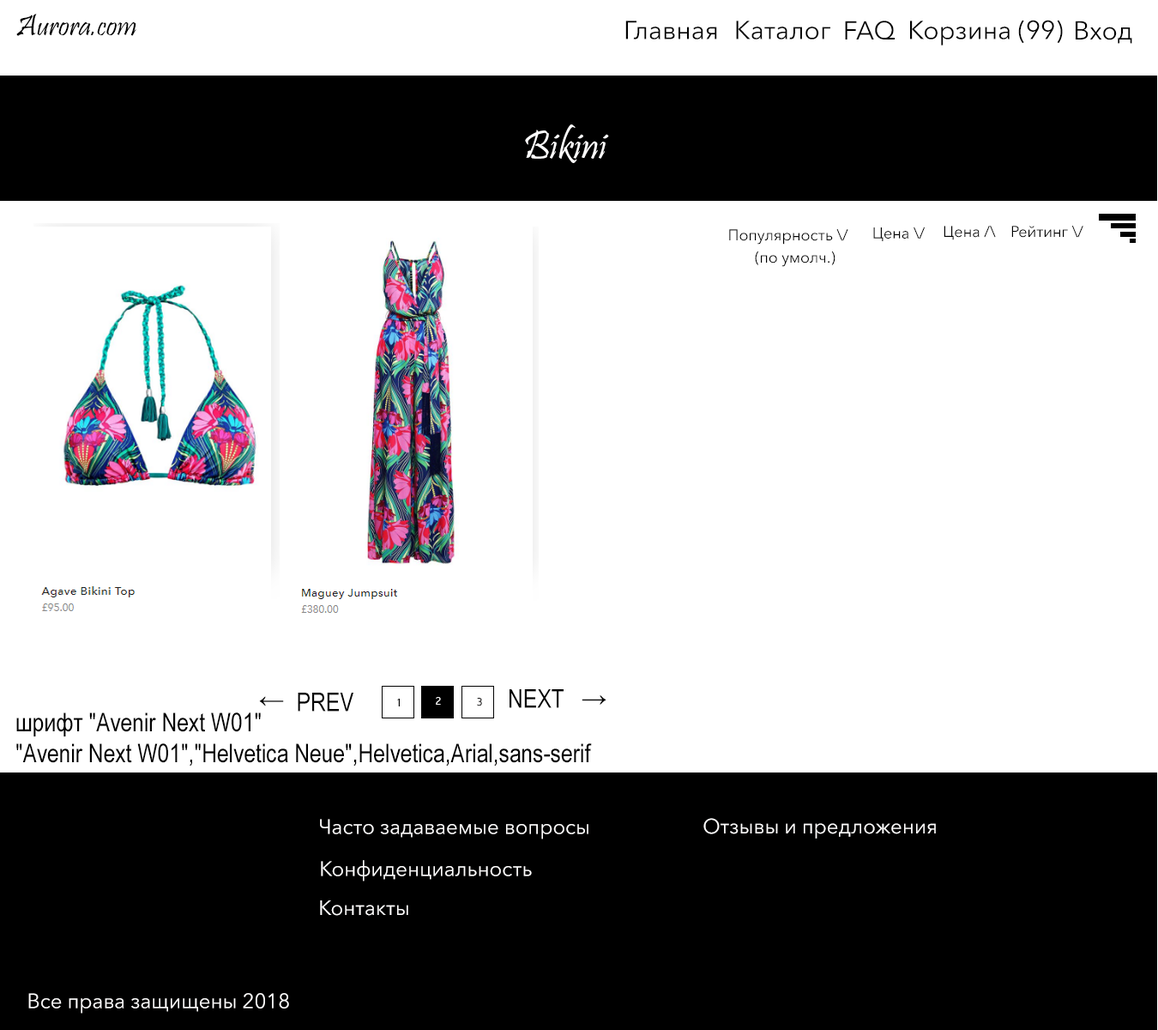
<style>
.page{position:relative;width:1158px;height:1030px;background:#ffffff}
.page>*{position:absolute;margin:0}
.t1{font:30.9px "Pristina-Regular";color:#000000}
.t2{font:25.7px "AvenirNextCyr-Regular";color:#000000}
.t3{font:41.2px "Pristina-Regular";color:#fffefe}
.t4{font:15.4px "AvenirNextCyr-Regular";color:#000000}
.t5{font:25.7px "ArialNarrow";color:#000000}
.t6{font:12px "Raavi";color:#000000}
.t7{font:12px "Raavi";color:#ffffff}
.t8{font:12px "Raavi";color:#010000}
.t9{font:20.6px "AvenirNextCyr-Regular";color:#fffefe}
</style>
<div class="page">
<p class="t1" style="left:16px;top:14px;width:120px;height:22px">Aurora.com</p>
<p class="t2" style="left:625px;top:21px;width:92px;height:18px">Главная</p>
<p class="t2" style="left:736px;top:21px;width:94px;height:18px">Каталог</p>
<p class="t2" style="left:845px;top:21px;width:50px;height:18px">FAQ</p>
<p class="t2" style="left:910px;top:20px;width:153px;height:25px">Корзина (99)</p>
<p class="t2" style="left:1076px;top:21px;width:56px;height:23px">Вход</p>
<p class="t3" style="left:525px;top:124px;width:84px;height:39px">Bikini</p>
<p class="t4" style="left:729px;top:229px;width:120px;height:16px">Популярность \/</p>
<p class="t4" style="left:873px;top:226px;width:52px;height:15px">Цена \/</p>
<p class="t4" style="left:944px;top:226px;width:52px;height:14px">Цена /\</p>
<p class="t4" style="left:1012px;top:226px;width:72px;height:12px">Рейтинг \/</p>
<p class="t4" style="left:755px;top:251px;width:81px;height:16px">(по умолч.)</p>
<p class="t5" style="left:510px;top:689px;width:54px;height:19px">NEXT</p>
<p class="t5" style="left:259px;top:696px;width:25px;height:10px">←</p>
<p class="t5" style="left:298px;top:692px;width:55px;height:19px">PREV</p>
<p class="t6" style="left:397px;top:698px;width:3px;height:8px">1</p>
<p class="t7" style="left:436px;top:697px;width:5px;height:7px">2</p>
<p class="t8" style="left:477px;top:698px;width:5px;height:8px">3</p>
<p class="t5" style="left:582px;top:695px;width:25px;height:9px">→</p>
<p class="t5" style="left:16px;top:712px;width:576px;height:54px;text-align:right">шрифт "Avenir Next W01"<br>"Avenir Next W01","Helvetica Neue",Helvetica,Arial,sans-serif</p>
<p class="t9" style="left:320px;top:818px;width:269px;height:21px">Часто задаваемые вопросы</p>
<p class="t9" style="left:704px;top:818px;width:232px;height:20px">Отзывы и предложения</p>
<p class="t9" style="left:321px;top:860px;width:211px;height:21px">Конфиденциальность</p>
<p class="t9" style="left:320px;top:900px;width:88px;height:15px">Контакты</p>
<p class="t9" style="left:28px;top:993px;width:261px;height:20px">Все права защищены 2018</p>
</div>
